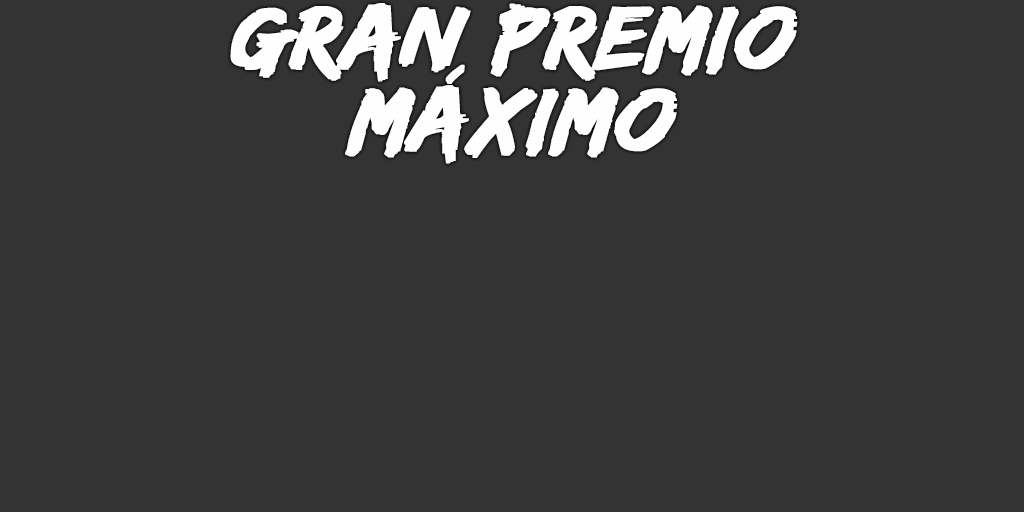
<style>
.page{position:relative;width:1024px;height:512px;background:#333333}
.page>*{position:absolute;margin:0}
.t1{font:93px/82px "EdoSZ";color:#fefefe;font-weight:bold;font-style:italic;scale:1.04 1}
</style>
<div class="page">
<p class="t1" style="left:230px;top:3px;width:568px;height:161px;text-align:center">gran premio<br>máximo</p>
</div>
